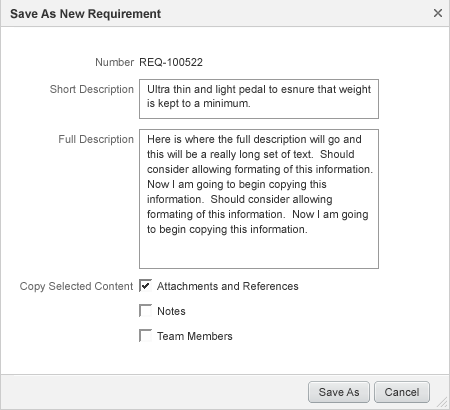
<style>
.page{position:relative;width:450px;height:410px;background:#ffffff}
.page>*{position:absolute;margin:0}
.t1{font:12px "Arial-BoldMT";color:#333333}
.t2{font:11px "ArialMT";color:#666666}
.t3{font:11px "ArialMT";color:#333333}
.t4{font:11px/15px "ArialMT";color:#333333}
.t5{font:11px/14px "ArialMT";color:#333333}
.t6{font:11px "ArialMT";letter-spacing:0.005em;color:#333333}
</style>
<div class="page">
<p class="t1" style="left:10px;top:9px;width:151px;height:12px">Save As New Requirement</p>
<p class="t2" style="left:96px;top:58px;width:39px;height:8px">Number</p>
<p class="t3" style="left:140px;top:58px;width:63px;height:9px">REQ-100522</p>
<p class="t2" style="left:50px;top:85px;width:84px;height:11px">Short Description</p>
<p class="t4" style="left:147px;top:85px;width:224px;height:25px">Ultra thin and light pedal to esnure that weight<br><span class="t5">is kept to a minimum.</span></p>
<p class="t2" style="left:59px;top:135px;width:75px;height:11px">Full Description</p>
<p class="t4" style="left:147px;top:135px;width:226px;height:101px">Here is where the full description will go and<br>this will be a really long set of text.  Should<br>consider allowing formating of this information.<br>Now I am going to begin copying this<br>information.  Should consider allowing <br>formating of this information.  Now I am going <br>to begin copying this information.</p>
<p class="t2" style="left:20px;top:282px;width:113px;height:11px">Copy Selected Content</p>
<p class="t3" style="left:157px;top:282px;width:142px;height:8px">Attachments and References</p>
<p class="t3" style="left:158px;top:307px;width:28px;height:8px">Notes</p>
<p class="t3" style="left:157px;top:332px;width:76px;height:8px">Team Members</p>
<p class="t6" style="left:319px;top:388px;width:40px;height:8px">Save As</p>
<p class="t6" style="left:385px;top:388px;width:34px;height:8px">Cancel</p>
</div>
